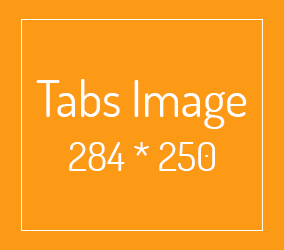
<style>
.page{position:relative;width:284px;height:250px;background:#fd9a15}
.page>*{position:absolute;margin:0}
.t1{font:50px "Dosis-Regular";color:#ffffff}
.t2{font:40px "Dosis-Regular";color:#ffffff}
</style>
<div class="page">
<p class="t1" style="left:36px;top:79px;width:211px;height:50px">Tabs Image</p>
<p class="t2" style="left:69px;top:142px;width:146px;height:29px">250 * 284</p>
</div>
